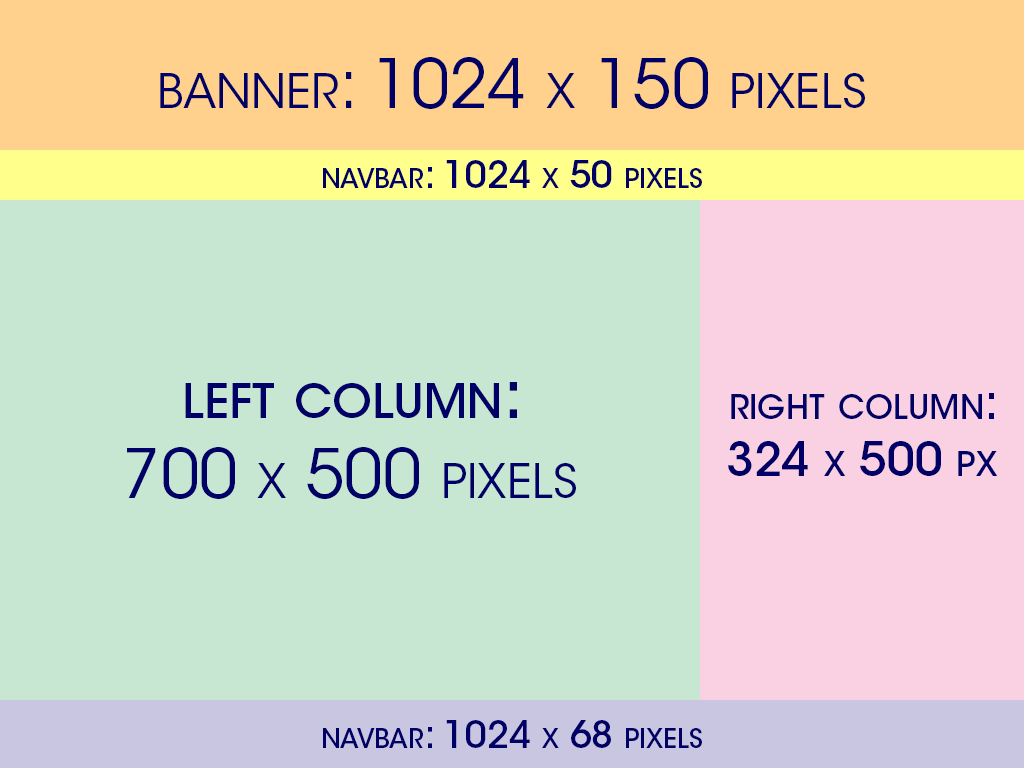
<style>
.page{position:relative;width:1024px;height:768px;background:#c7e7d2}
.page>*{position:absolute;margin:0}
.t1{font:67px "ITCAvantGardeStd-Bk";color:#000066;font-variant:small-caps}
.t2{font:37px "ITCAvantGardeStd-Md";color:#000066;font-variant:small-caps}
.t3{font:67px "ITCAvantGardeStd-Md";color:#000066;font-variant:small-caps}
.t4{font:47px "ITCAvantGardeStd-Md";color:#000066;font-variant:small-caps}
</style>
<div class="page">
<p class="t1" style="left:160px;top:57px;width:705px;height:52px">banner: 1024 x 150 pixels</p>
<p class="t2" style="left:323px;top:160px;width:379px;height:28px">navbar: 1024 x 50 pixels</p>
<p class="t1" style="left:127px;top:382px;width:449px;height:117px;text-align:center"><span class="t3">left column: <br></span>700 x 500 pixels</p>
<p class="t4" style="left:728px;top:393px;width:270px;height:83px;text-align:center">right column: <br>324 x 500 px</p>
<p class="t2" style="left:323px;top:720px;width:379px;height:28px">navbar: 1024 x 68 pixels</p>
</div>
